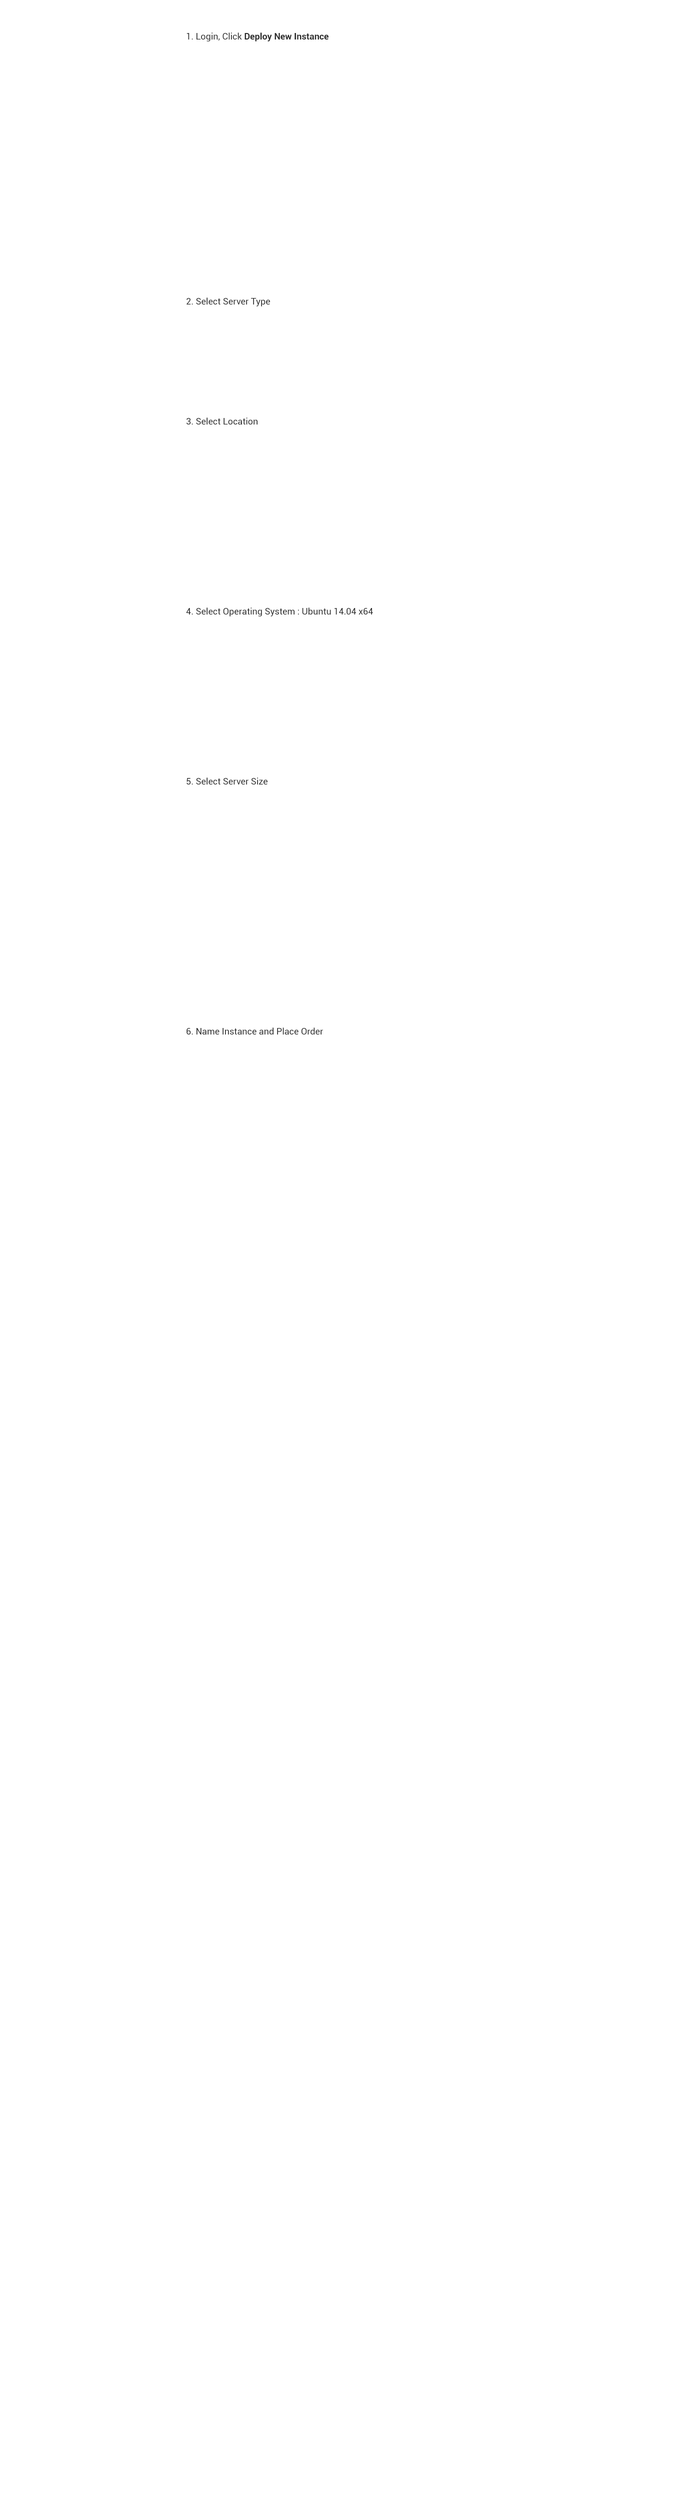
<style>
.page{position:relative;width:700px;height:2520px;background:#ffffff}
.page>*{position:absolute;margin:0}
.t1{font:9px "Roboto-Bold";color:#2b2b2b}
.t2{font:9px "Roboto-Regular";color:#2b2b2b}
</style>
<div class="page">
<p class="t1" style="left:186px;top:32px;width:142px;height:10px"><span class="t2">1. Login, Click </span>Deploy New Instance</p>
<p class="t2" style="left:186px;top:298px;width:84px;height:8px">2. Select Server Type</p>
<p class="t2" style="left:186px;top:418px;width:72px;height:7px">3. Select Location</p>
<p class="t2" style="left:186px;top:608px;width:187px;height:8px">4. Select Operating System : Ubuntu 14.04 x64</p>
<p class="t2" style="left:186px;top:778px;width:82px;height:7px">5. Select Server Size</p>
<p class="t2" style="left:186px;top:1028px;width:137px;height:7px">6. Name Instance and Place Order</p>
</div>
